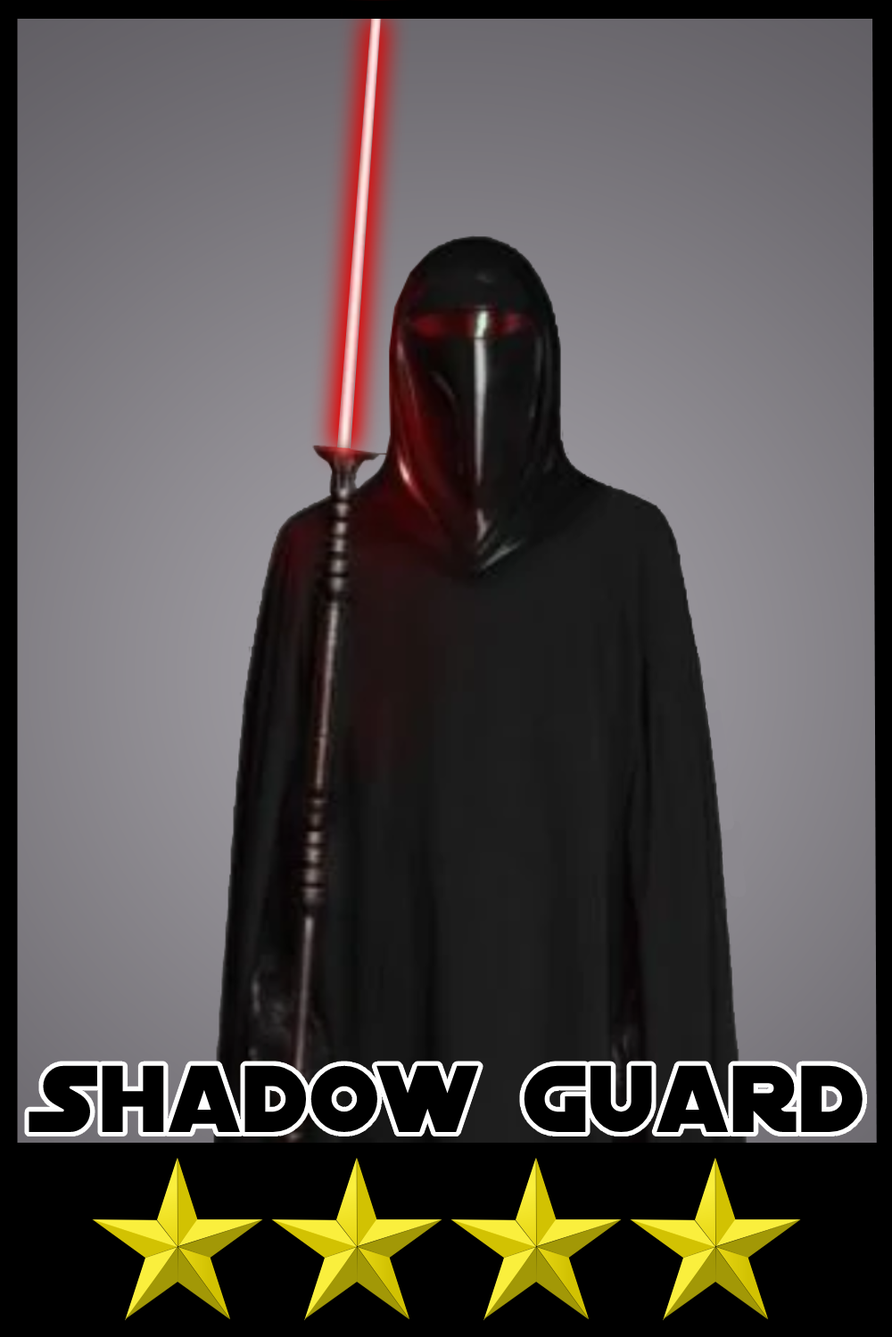
<style>
.page{position:relative;width:892px;height:1337px}
.page>*{position:absolute;margin:0}
.t1{font:101.8px "DistantGalaxy";color:#000000}
</style>
<div class="page">
<p class="t1" style="left:29px;top:1065px;width:833px;height:67px">Shadow guard</p>
</div>
